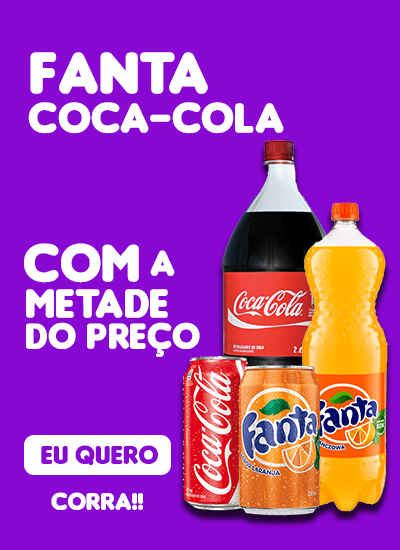
<style>
.page{position:relative;width:400px;height:550px;background:#8807d2}
.page>*{position:absolute;margin:0}
.t1{font:62.9px "Insaniburger";color:#ffffff}
.t2{font:45px "Insaniburger";color:#ffffff}
.t3{font:56.4px "Insaniburger";color:#ffffff}
.t4{font:38.6px "Insaniburger";color:#ffffff}
.t5{font:43.5px "Insaniburger";color:#ffffff}
.t6{font:25.5px "Insaniburger";color:#ffffff}
</style>
<div class="page">
<p class="t1" style="left:30px;top:52px;width:178px;height:42px">fanta</p>
<p class="t2" style="left:28px;top:102px;width:256px;height:32px">Coca-cola</p>
<p class="t3" style="left:24px;top:243px;width:115px;height:40px">com</p>
<p class="t4" style="left:150px;top:250px;width:25px;height:26px">a</p>
<p class="t5" style="left:26px;top:289px;width:142px;height:29px">metade</p>
<p class="t4" style="left:26px;top:322px;width:50px;height:27px">do</p>
<p class="t4" style="left:87px;top:322px;width:113px;height:35px">preço</p>
<p class="t6" style="left:51px;top:492px;width:92px;height:18px">corra!!</p>
</div>
